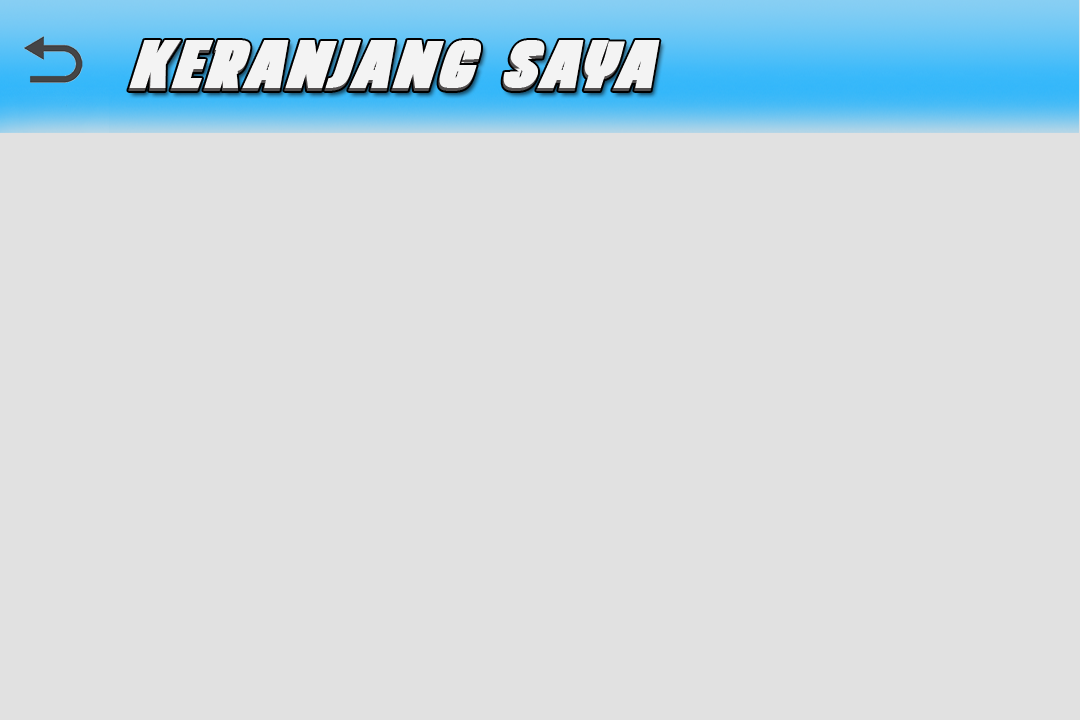
<style>
.page{position:relative;width:1080px;height:720px;background:#e1e1e1}
.page>*{position:absolute;margin:0}
.t1{font:70.9px "EMINOR-BlackItalic";color:#f3f3f3;font-weight:bold;font-style:italic}
</style>
<div class="page">
<p class="t1" style="left:128px;top:40px;width:532px;height:51px">KERANJANG SAYA</p>
</div>
